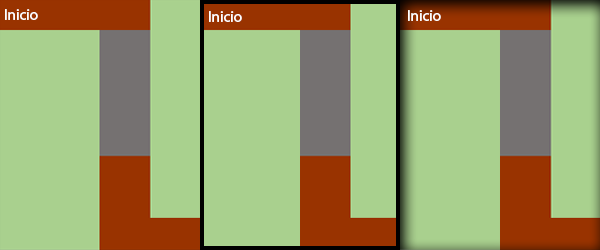
<style>
.page{position:relative;width:600px;height:250px;background:#a9d08e}
.page>*{position:absolute;margin:0}
.t1{font:15px "MyriadHebrew-Regular";color:#ffffff}
</style>
<div class="page">
<p class="t1" style="left:5px;top:9px;width:33px;height:11px">Inicio</p>
<p class="t1" style="left:209px;top:11px;width:33px;height:11px">Inicio</p>
<p class="t1" style="left:408px;top:10px;width:33px;height:11px">Inicio</p>
</div>
